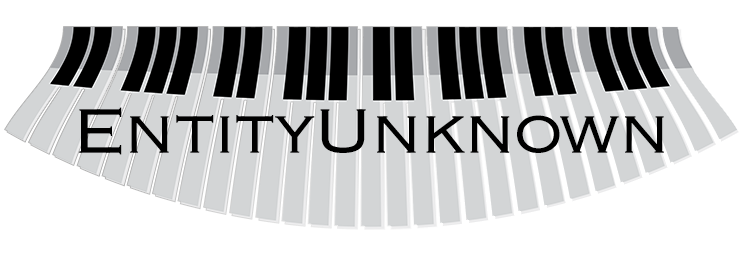
<style>
.page{position:relative;width:744px;height:256px;background:#ffffff}
.page>*{position:absolute;margin:0}
.t1{font:57.2px "EngraverNormal";color:#000000}
</style>
<div class="page">
<p class="t1" style="left:79px;top:107px;width:585px;height:48px">EntityUnknown</p>
</div>
